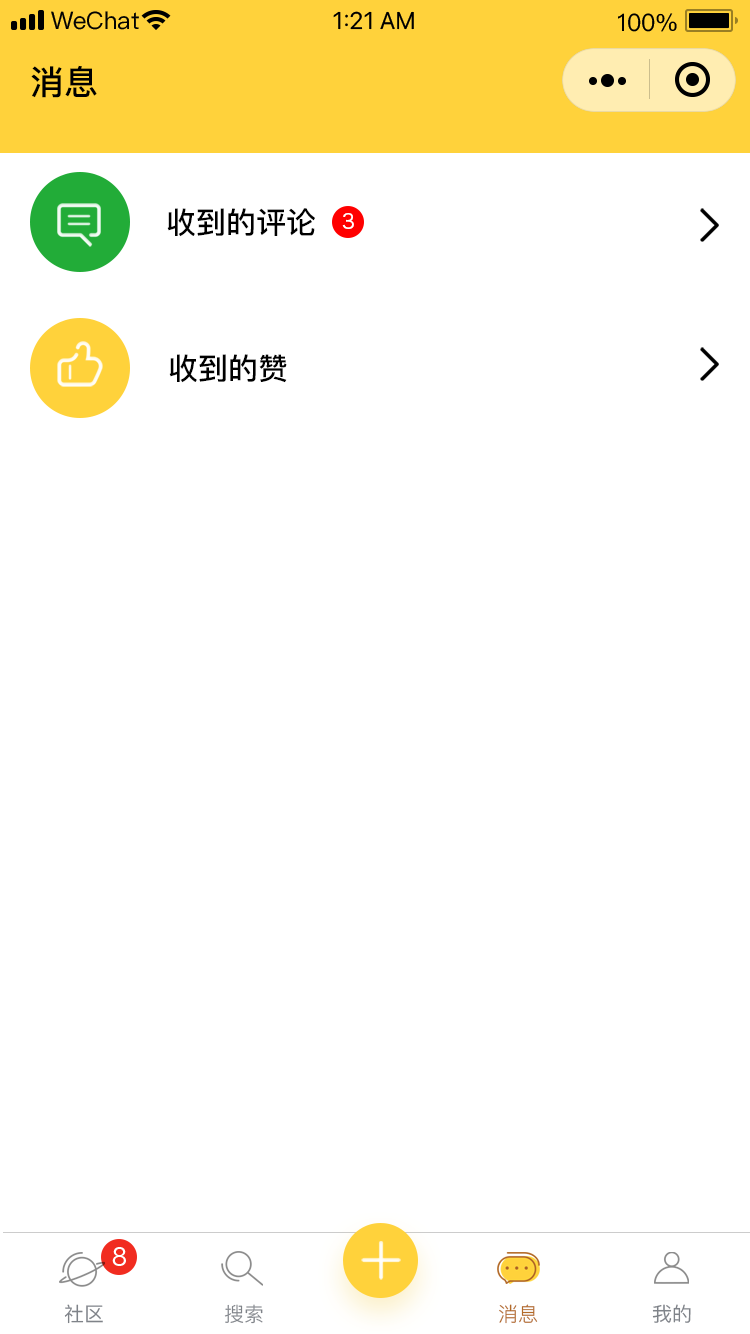
<style>
.page{position:relative;width:750px;height:1334px;background:#ffffff}
.page>*{position:absolute;margin:0}
.t1{font:34px "PingFang-SC-Bold";color:#000000}
.t2{font:30px "PingFang-SC-Bold";color:#000000}
.t3{font:20px "HiraginoSansGB-W3";color:#ffffff}
.t4{font:20px "PingFang-SC-Medium";color:#7f8389}
.t5{font:20px "PingFangSC-Regular";color:#7f8389}
.t6{font:20px "PingFangSC-Regular";color:#b46b27}
.t7{font:20px "PingFangSC-Medium";color:#7f8389}
</style>
<div class="page">
<p class="t1" style="left:31px;top:65px;width:66px;height:33px">消息</p>
<p class="t2" style="left:167px;top:208px;width:148px;height:29px">收到的评论</p>
<p class="t3" style="left:342px;top:213px;width:12px;height:16px">3</p>
<p class="t2" style="left:169px;top:354px;width:118px;height:29px">收到的赞</p>
<p class="t4" style="left:64px;top:1304px;width:39px;height:20px">社区</p>
<p class="t5" style="left:224px;top:1304px;width:39px;height:20px">搜索</p>
<p class="t6" style="left:499px;top:1304px;width:39px;height:20px">消息</p>
<p class="t7" style="left:652px;top:1304px;width:39px;height:19px">我的</p>
</div>
